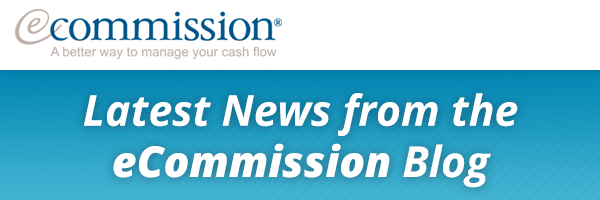
<style>
.page{position:relative;width:600px;height:200px;background:#ffffff}
.page>*{position:absolute;margin:0}
.t1{font:42.7px "OpenSans-BoldItalic";color:#ffffff}
.t2{font:42.7px "OpenSans-ExtraboldItalic";color:#ffffff}
</style>
<div class="page">
<p class="t1" style="left:84px;top:93px;width:434px;height:95px;text-align:center">Latest News from the<br><span class="t2">eCommission</span> Blog</p>
</div>
